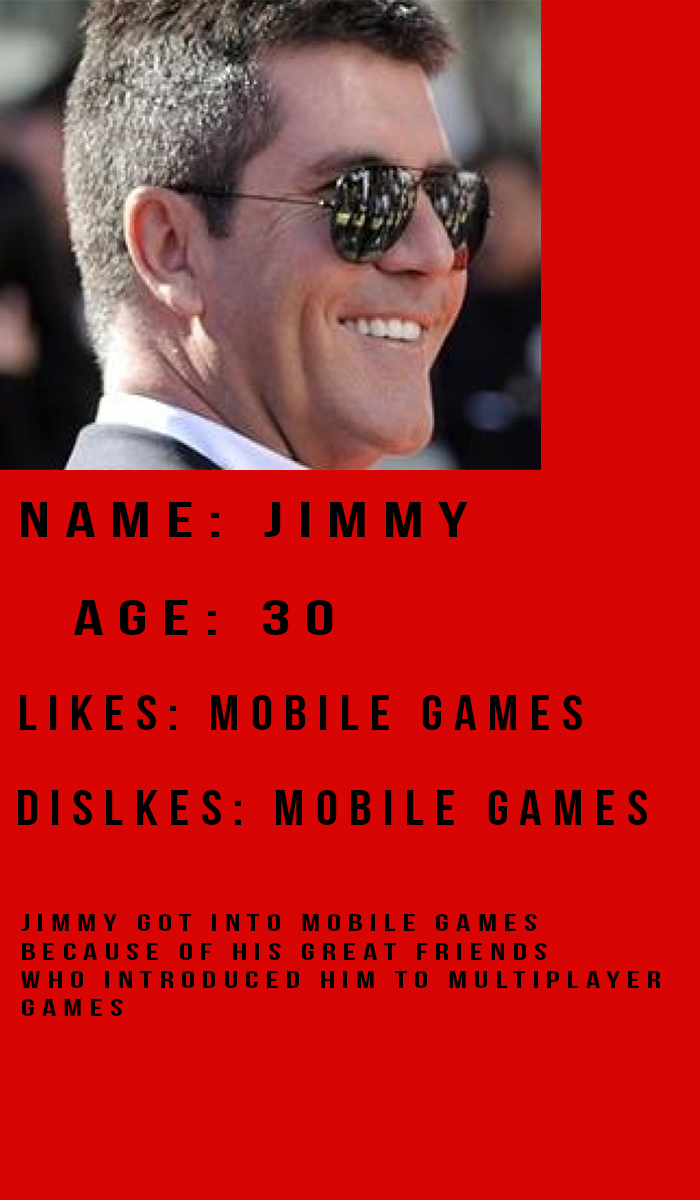
<style>
.page{position:relative;width:700px;height:1200px;background:#d70503}
.page>*{position:absolute;margin:0}
.t1{font:12px "BebasNeue";letter-spacing:0.2em;color:#000000;scale:1.5 1}
.t2{font:12px "BebasNeue";letter-spacing:0.2em;color:#000000;scale:1.12 1}
.t3{font:5.7px "BebasNeue";letter-spacing:0.2em;color:#000000;scale:1.5 1}
</style>
<div class="page">
<p class="t1" style="left:21px;top:502px;width:447px;height:35px;text-align:center">name: jimmy</p>
<p class="t1" style="left:74px;top:600px;width:259px;height:35px;text-align:center">age: 30</p>
<p class="t2" style="left:20px;top:695px;width:562px;height:35px;text-align:center">likes: mobile games</p>
<p class="t2" style="left:18px;top:790px;width:629px;height:35px;text-align:center">dislkes: mobile games</p>
<p class="t3" style="left:21px;top:914px;width:640px;height:102px">jimmy got into mobile games<br>because of his great friends <br>who introduced him to multiplayer <br>games</p>
</div>
